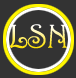
<style>
.page{position:relative;width:76px;height:78px;background:#333333}
.page>*{position:absolute;margin:0}
.t1{font:33.3px "Harrington"}
</style>
<div class="page">
<p class="t1" style="left:9px;top:24px;width:58px;height:25px">LSN</p>
</div>
